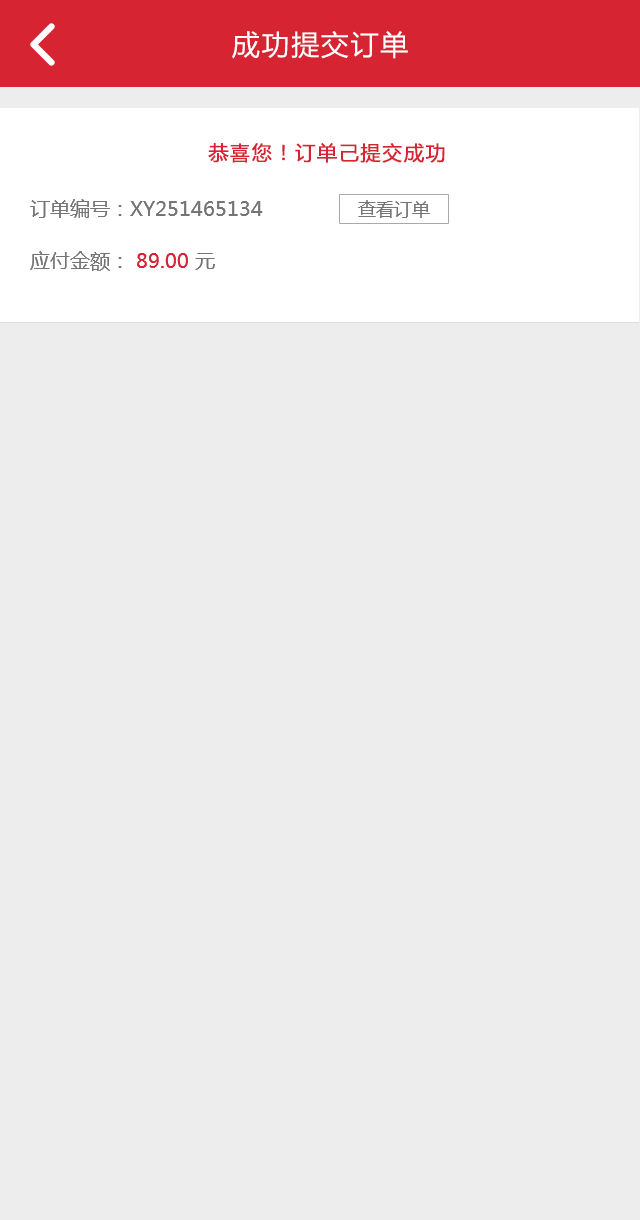
<style>
.page{position:relative;width:640px;height:1220px;background:#ededed}
.page>*{position:absolute;margin:0}
.t1{font:28px "MicrosoftYaHei";letter-spacing:0.06em;color:#ffffff}
.t2{font:20px "MicrosoftYaHei";letter-spacing:0.06em;color:#d62432;font-weight:bold}
.t3{font:20px "MicrosoftYaHei";color:#757575}
.t4{font:18px "MicrosoftYaHei";color:#757575}
.t5{font:20px "MicrosoftYaHei";color:#d62432}
</style>
<div class="page">
<p class="t1" style="left:232px;top:31px;width:176px;height:28px">成功提交订单</p>
<p class="t2" style="left:208px;top:143px;width:237px;height:20px">恭喜您！订单己提交成功</p>
<p class="t3" style="left:30px;top:199px;width:233px;height:19px">订单编号：XY251465134</p>
<p class="t4" style="left:358px;top:200px;width:72px;height:18px">查看订单</p>
<p class="t3" style="left:30px;top:251px;width:185px;height:20px">应付金额： <span class="t5">89.00 </span>元</p>
</div>
